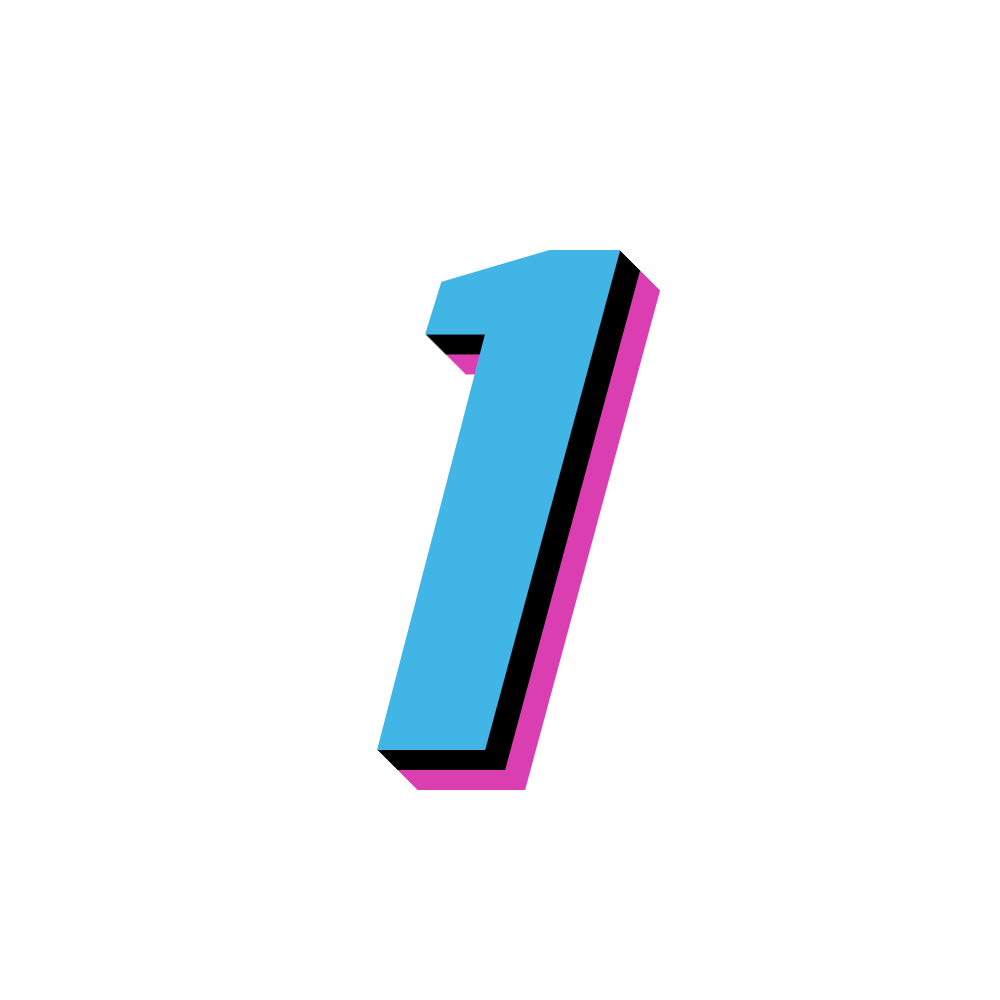
<style>
.page{position:relative;width:1000px;height:1000px;background:#ffffff}
.page>*{position:absolute;margin:0}
.t1{font:625px "NBAHeat";color:#41b6e6}
</style>
<div class="page">
<p class="t1" style="left:377px;top:250px;width:244px;height:500px">1</p>
</div>
